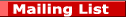
<style>
.page{position:relative;width:126px;height:17px;background:#cc0000}
.page>*{position:absolute;margin:0}
.t1{font:13px "Verdana-Bold";color:#ffffff;scale:1.15 1}
</style>
<div class="page">
<p class="t1" style="left:13px;top:3px;width:96px;height:14px">Mailing List</p>
</div>
